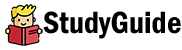
<style>
.page{position:relative;width:182px;height:50px;background:#ffffff}
.page>*{position:absolute;margin:0}
.t1{font:31.7px "FranklinGothic-DemiCond";color:#000000}
</style>
<div class="page">
<p class="t1" style="left:43px;top:11px;width:138px;height:28px">StudyGuide</p>
</div>
